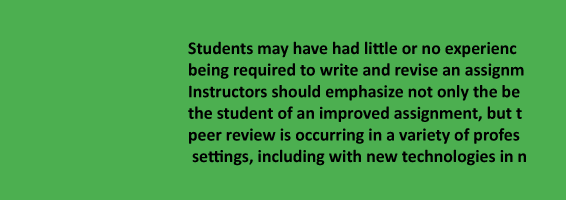
<style>
.page{position:relative;width:566px;height:200px;background:#4caf50}
.page>*{position:absolute;margin:0}
.t1{font:18px "Calibri-Bold";color:#000000}
</style>
<div class="page">
<p class="t1" style="left:188px;top:41px;width:338px;height:125px">Students may have had little or no experienc <br>being required to write and revise an assignm<br>Instructors should emphasize not only the be<br>the student of an improved assignment, but t<br>peer review is occurring in a variety of profes<br> settings, including with new technologies in n</p>
</div>
